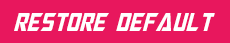
<style>
.page{position:relative;width:230px;height:43px;background:#e8175d}
.page>*{position:absolute;margin:0}
.t1{font:26px "MegatronCondensed-Italic";color:#ffffff}
</style>
<div class="page">
<p class="t1" style="left:14px;top:13px;width:201px;height:18px">restore default</p>
</div>
